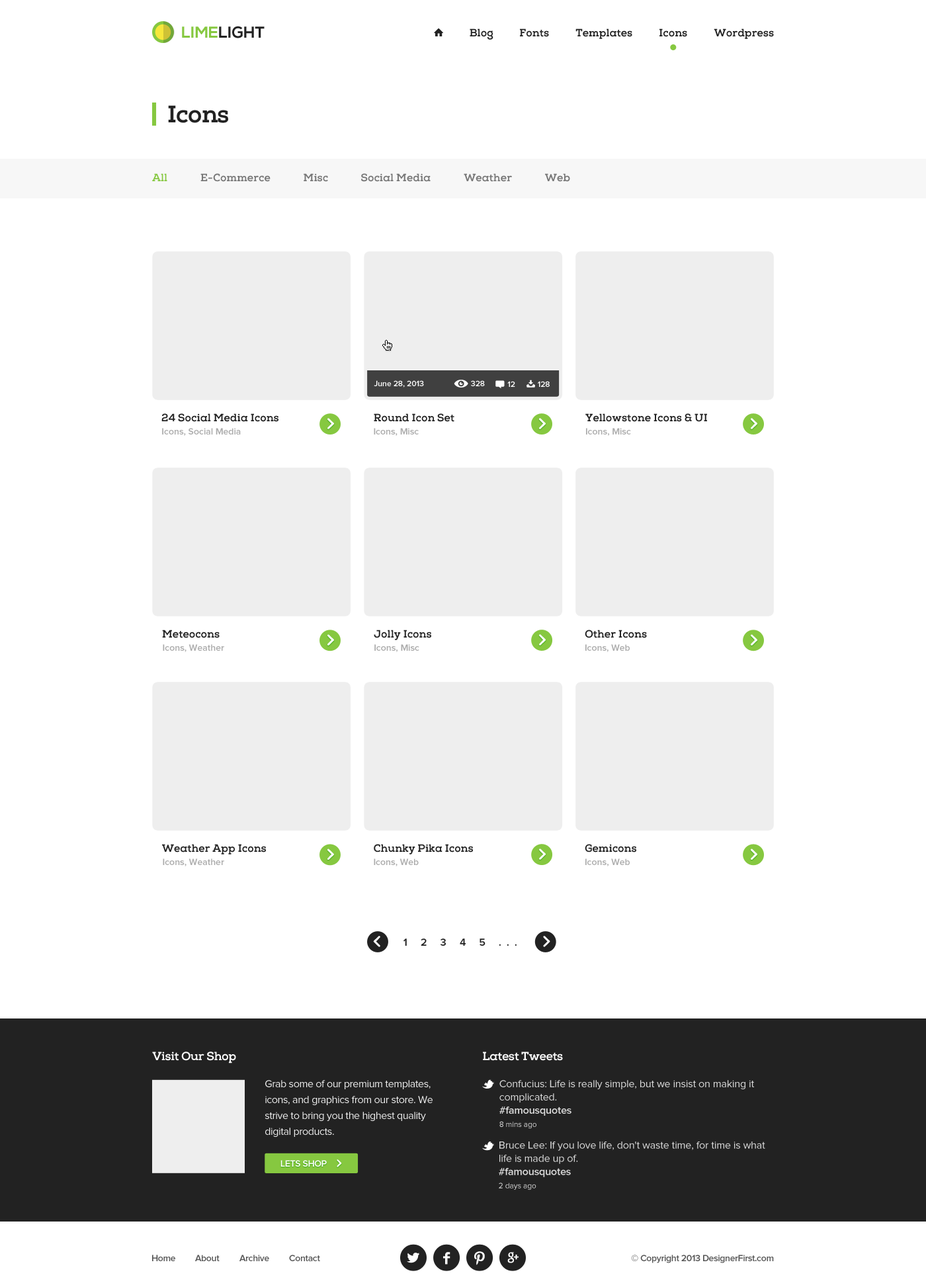
<style>
.page{position:relative;width:926px;height:1287px;background:#ffffff}
.page>*{position:absolute;margin:0}
.t1{font:15.9px "NexaBold";color:#222222;text-transform:uppercase}
.t2{font:15.9px "NexaBold";color:#86c840;text-transform:uppercase}
.t3{font:10.6px "NexaSlab-xBold";color:#222222}
.t4{font:23.8px "NexaSlab-xBold";letter-spacing:-0.025em;color:#222222}
.t5{font:10.6px "NexaSlab-xBold";color:#86c840}
.t6{font:10.6px "NexaSlab-xBold";color:#777777}
.t7{font:7.9px "ProximaNova-Semibold";color:#ffffff}
.t8{font:9.3px "ProximaNova-Semibold";color:#aaaaaa}
.t9{font:10.6px "ProximaNova-Semibold";letter-spacing:0.5em;color:#222222}
.t10{font:11.9px "NexaSlab-xBold";letter-spacing:-0.025em;color:#ffffff}
.t11{font:10.6px/15.9px "ProximaNova-Regular";letter-spacing:-0.025em;color:#eeeeee}
.t12{font:10.6px/13.2px "ProximaNova-Regular";letter-spacing:-0.01em;color:#dcdcdc}
.t13{font:10.6px/13.2px "ProximaNova-Semibold";letter-spacing:-0.01em;color:#dcdcdc}
.t14{font:7.9px/13.2px "ProximaNova-Regular";letter-spacing:-0.01em;color:#dcdcdc}
.t15{font:9.3px "ProximaNova-Semibold";letter-spacing:-0.025em;color:#ffffff;text-transform:uppercase}
.t16{font:9.3px "ProximaNova-Semibold";letter-spacing:-0.025em;color:#555555}
</style>
<div class="page">
<p class="t1" style="left:182px;top:26px;width:83px;height:12px"><span class="t2">Lime</span>Light</p>
<p class="t3" style="left:470px;top:28px;width:24px;height:12px">Blog</p>
<p class="t3" style="left:520px;top:28px;width:29px;height:9px">Fonts</p>
<p class="t3" style="left:576px;top:28px;width:56px;height:11px">Templates</p>
<p class="t3" style="left:660px;top:28px;width:27px;height:9px">Icons</p>
<p class="t3" style="left:714px;top:28px;width:60px;height:11px">Wordpress</p>
<p class="t4" style="left:168px;top:105px;width:60px;height:18px">Icons</p>
<p class="t5" style="left:152px;top:173px;width:15px;height:8px">All</p>
<p class="t6" style="left:200px;top:173px;width:71px;height:9px">E-Commerce</p>
<p class="t6" style="left:304px;top:173px;width:24px;height:9px">Misc</p>
<p class="t6" style="left:361px;top:173px;width:70px;height:9px">Social Media</p>
<p class="t6" style="left:464px;top:173px;width:48px;height:9px">Weather</p>
<p class="t6" style="left:545px;top:173px;width:25px;height:9px">Web</p>
<p class="t7" style="left:374px;top:380px;width:50px;height:8px">June 28, 2013</p>
<p class="t7" style="left:471px;top:380px;width:14px;height:6px">328</p>
<p class="t7" style="left:507px;top:381px;width:8px;height:6px">12</p>
<p class="t7" style="left:538px;top:381px;width:12px;height:6px">128</p>
<p class="t3" style="left:161px;top:413px;width:118px;height:9px">24 Social Media Icons</p>
<p class="t3" style="left:374px;top:413px;width:81px;height:9px">Round Icon Set</p>
<p class="t3" style="left:585px;top:413px;width:122px;height:9px">Yellowstone Icons &amp; UI</p>
<p class="t8" style="left:162px;top:428px;width:79px;height:8px">Icons, Social Media</p>
<p class="t8" style="left:374px;top:428px;width:45px;height:8px">Icons, Misc</p>
<p class="t8" style="left:586px;top:428px;width:45px;height:8px">Icons, Misc</p>
<p class="t3" style="left:162px;top:630px;width:58px;height:8px">Meteocons</p>
<p class="t3" style="left:374px;top:630px;width:57px;height:10px">Jolly Icons</p>
<p class="t3" style="left:585px;top:630px;width:62px;height:8px">Other Icons</p>
<p class="t8" style="left:163px;top:644px;width:61px;height:8px">Icons, Weather</p>
<p class="t8" style="left:374px;top:644px;width:45px;height:8px">Icons, Misc</p>
<p class="t8" style="left:585px;top:644px;width:45px;height:8px">Icons, Web</p>
<p class="t3" style="left:162px;top:844px;width:104px;height:11px">Weather App Icons</p>
<p class="t3" style="left:374px;top:844px;width:99px;height:11px">Chunky Pika Icons</p>
<p class="t3" style="left:585px;top:844px;width:51px;height:9px">Gemicons</p>
<p class="t8" style="left:163px;top:859px;width:61px;height:8px">Icons, Weather</p>
<p class="t8" style="left:374px;top:859px;width:45px;height:8px">Icons, Web</p>
<p class="t8" style="left:585px;top:859px;width:45px;height:8px">Icons, Web</p>
<p class="t9" style="left:404px;top:939px;width:113px;height:7px">1 2 3 4 5 ...</p>
<p class="t10" style="left:152px;top:1052px;width:84px;height:12px">Visit Our Shop</p>
<p class="t10" style="left:483px;top:1052px;width:80px;height:9px">Latest Tweets</p>
<p class="t11" style="left:265px;top:1080px;width:168px;height:57px">Grab some of our premium templates, icons, and graphics from our store. We strive to bring you the highest quality digital products.</p>
<p class="t12" style="left:499px;top:1080px;width:256px;height:49px">Confucius: Life is really simple, but we insist on making it complicated. <br><span class="t13">#famousquotes<br></span><span class="t14">8 mins ago</span></p>
<p class="t12" style="left:499px;top:1142px;width:266px;height:48px">Bruce Lee: If you love life, don't waste time, for time is what life is made up of. <br><span class="t13">#famousquotes<br></span><span class="t14">2 days ago</span></p>
<p class="t15" style="left:281px;top:1160px;width:46px;height:7px">Lets Shop</p>
<p class="t16" style="left:152px;top:1255px;width:23px;height:7px">Home</p>
<p class="t16" style="left:195px;top:1255px;width:25px;height:7px">About</p>
<p class="t16" style="left:239px;top:1255px;width:30px;height:7px">Archive</p>
<p class="t16" style="left:289px;top:1255px;width:31px;height:7px">Contact</p>
<p class="t16" style="left:631px;top:1255px;width:143px;height:9px">© Copyright 2013 DesignerFirst.com</p>
</div>
